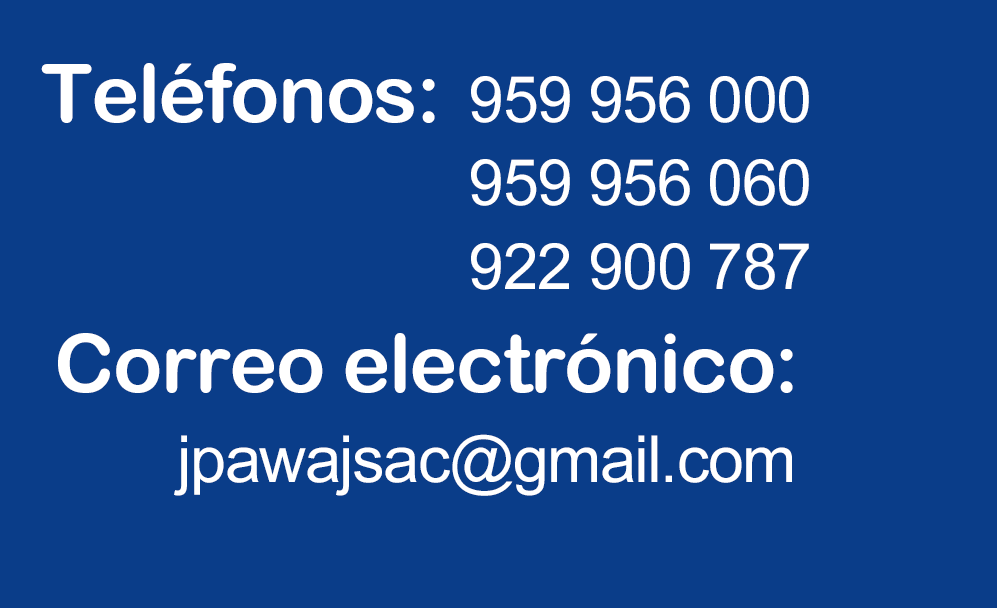
<style>
.page{position:relative;width:997px;height:608px;background:#0a3d89}
.page>*{position:absolute;margin:0}
.t1{font:81px "ArialRoundedMTBold";letter-spacing:-0.022em;color:#ffffff}
.t2{font:63.6px/83.3px "ArialMT";letter-spacing:-0.022em;color:#ffffff}
.t3{font:64.7px "ArialMT";letter-spacing:-0.022em;color:#ffffff}
</style>
<div class="page">
<p class="t1" style="left:41px;top:63px;width:394px;height:60px">Teléfonos:</p>
<p class="t2" style="left:471px;top:76px;width:338px;height:214px">959 956 000<br>959 956 060<br>922 900 787</p>
<p class="t1" style="left:58px;top:333px;width:735px;height:60px">Correo electrónico:</p>
<p class="t3" style="left:174px;top:434px;width:618px;height:62px">jpawajsac@gmail.com</p>
</div>
